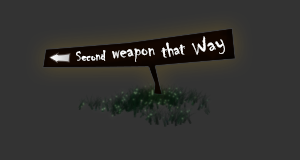
<style>
.page{position:relative;width:300px;height:160px;background:#333333}
.page>*{position:absolute;margin:0}
.t1{font:25.8px "Chiller-Regular";color:#ffffff}
.t2{font:15.1px "Chiller-Regular";color:#ffffff}
.t3{font:22.3px "Chiller-Regular";color:#ffffff}
.t4{font:19.9px "Chiller-Regular";color:#ffffff}
</style>
<div class="page">
<p class="t1" style="left:191px;top:36px;width:34px;height:19px;rotate:-18deg">Way</p>
<p class="t2" style="left:76px;top:50px;width:30px;height:11px;rotate:-3deg">Second</p>
<p class="t3" style="left:112px;top:48px;width:43px;height:14px;rotate:-4deg">weapon</p>
<p class="t4" style="left:161px;top:42px;width:24px;height:16px;rotate:-9deg">that</p>
</div>
